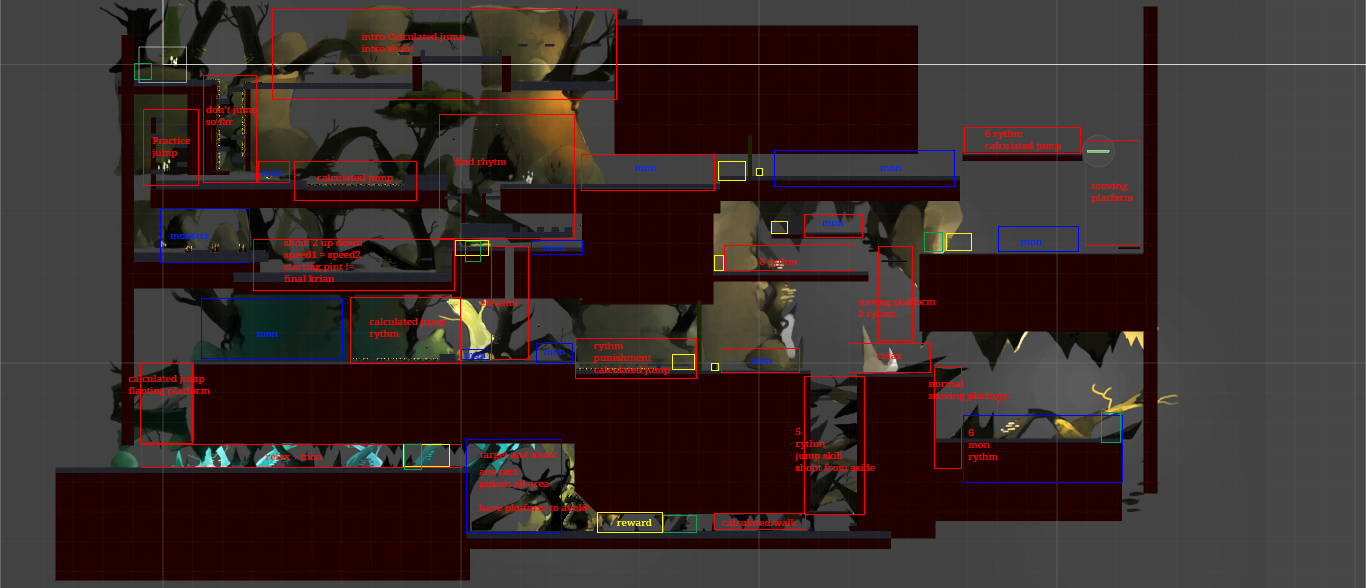
<style>
.page{position:relative;width:1366px;height:588px;background:#424242}
.page>*{position:absolute;margin:0}
.t1{font:10px "DroidSerif";color:#ff0000}
.t2{font:10px "DroidSerif";color:#0024ff}
.t3{font:10px "DroidSerif";color:#ffff00}
</style>
<div class="page">
<p class="t1" style="left:361px;top:33px;width:104px;height:19px">intro Calculated jump<br>intro shoot</p>
<p class="t1" style="left:206px;top:106px;width:52px;height:19px">don’t jump<br>so far</p>
<p class="t1" style="left:152px;top:137px;width:38px;height:21px">Practice <br>jump</p>
<p class="t1" style="left:985px;top:130px;width:76px;height:21px">6 rythm<br>calculated jump</p>
<p class="t1" style="left:455px;top:158px;width:52px;height:9px">find rhytm</p>
<p class="t2" style="left:261px;top:171px;width:22px;height:5px">mon</p>
<p class="t1" style="left:317px;top:174px;width:76px;height:9px">calculated jump</p>
<p class="t2" style="left:634px;top:166px;width:23px;height:5px">mon</p>
<p class="t2" style="left:880px;top:166px;width:22px;height:5px">mon</p>
<p class="t1" style="left:1091px;top:182px;width:43px;height:21px">moving <br>platform</p>
<p class="t2" style="left:822px;top:221px;width:22px;height:5px">mon</p>
<p class="t2" style="left:170px;top:233px;width:40px;height:6px">monster</p>
<p class="t1" style="left:284px;top:239px;width:79px;height:43px">shoot 2 up down<br>speed1 = speed2<br>starting pint !=<br>final krian</p>
<p class="t2" style="left:543px;top:246px;width:22px;height:5px">mon</p>
<p class="t2" style="left:1020px;top:240px;width:22px;height:5px">mon</p>
<p class="t1" style="left:759px;top:258px;width:39px;height:9px">8 rythm</p>
<p class="t1" style="left:480px;top:299px;width:40px;height:7px">elevator</p>
<p class="t1" style="left:858px;top:298px;width:78px;height:21px">noving platform<br>3 rythm</p>
<p class="t1" style="left:369px;top:318px;width:77px;height:21px">calculated jump <br>rythm</p>
<p class="t2" style="left:256px;top:332px;width:22px;height:5px">mon</p>
<p class="t1" style="left:593px;top:342px;width:77px;height:33px">rythm<br>punishment<br>calculated jump</p>
<p class="t2" style="left:464px;top:353px;width:22px;height:5px">mon</p>
<p class="t2" style="left:543px;top:350px;width:22px;height:5px">mon</p>
<p class="t1" style="left:877px;top:352px;width:26px;height:7px">relax</p>
<p class="t2" style="left:750px;top:359px;width:22px;height:5px">mon</p>
<p class="t1" style="left:128px;top:375px;width:82px;height:21px">calculated jump<br>flaoting platform</p>
<p class="t1" style="left:928px;top:380px;width:81px;height:21px">normal <br>moving platform</p>
<p class="t1" style="left:995px;top:398px;width:6px;height:7px">7</p>
<p class="t1" style="left:795px;top:428px;width:80px;height:43px">5<br>rythm<br>jump skill<br>shoot from aside</p>
<p class="t1" style="left:968px;top:429px;width:30px;height:33px">6<br>mon <br>rythm</p>
<p class="t1" style="left:265px;top:453px;width:58px;height:7px">relax + mon</p>
<p class="t1" style="left:480px;top:451px;width:78px;height:9px">target and shoot</p>
<p class="t1" style="left:479px;top:468px;width:109px;height:45px">aoe rain<br>poison all area<br><br>have platform to avoid</p>
<p class="t3" style="left:617px;top:519px;width:35px;height:7px">reward</p>
<p class="t1" style="left:722px;top:519px;width:75px;height:7px">calculated walk</p>
</div>
